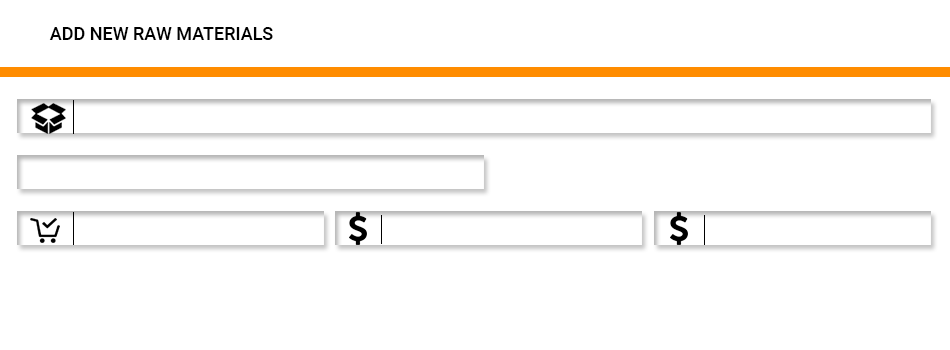
<style>
.page{position:relative;width:950px;height:350px;background:#ffffff}
.page>*{position:absolute;margin:0}
.t1{font:18px "Roboto-Medium";color:#000000}
</style>
<div class="page">
<p class="t1" style="left:49px;top:27px;width:224px;height:13px">ADD NEW RAW MATERIALS</p>
</div>
